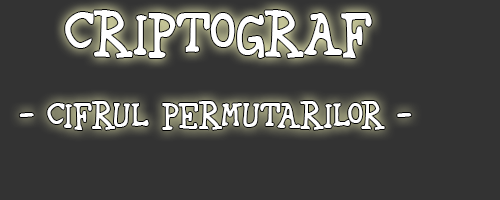
<style>
.page{position:relative;width:500px;height:200px;background:#333333}
.page>*{position:absolute;margin:0}
.t1{font:50px "42";color:#ffffff}
.t2{font:30px "42";color:#ffffff}
</style>
<div class="page">
<p class="t1" style="left:65px;top:10px;width:307px;height:48px">Criptograf</p>
<p class="t2" style="left:19px;top:101px;width:393px;height:29px">- Cifrul Permutarilor -</p>
</div>
